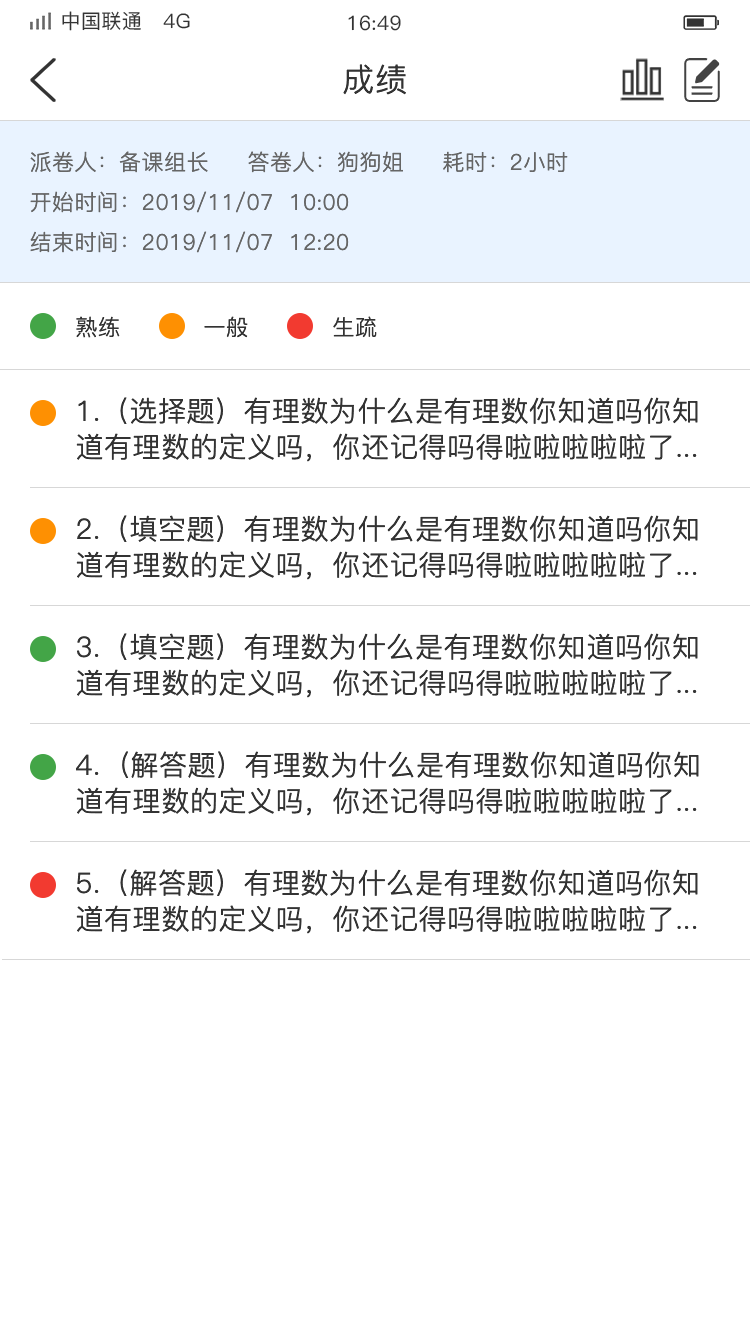
<style>
.page{position:relative;width:750px;height:1334px;background:#ffffff}
.page>*{position:absolute;margin:0}
.t1{font:20px "PingFang-SC-Medium";letter-spacing:0.02em;color:#333333}
.t2{font:32px "PingFang-SC-Regular";letter-spacing:0.02em;color:#333333}
.t3{font:22px "PingFang-SC-Regular";letter-spacing:0.02em;color:#666666}
.t4{font:22px "PingFang-SC-Regular";letter-spacing:0.02em;color:#333333}
.t5{font:28px/36px "PingFang-SC-Regular";letter-spacing:0.02em;color:#333333}
</style>
<div class="page">
<p class="t1" style="left:62px;top:11px;width:128px;height:20px">中国联通   4G</p>
<p class="t1" style="left:348px;top:15px;width:53px;height:16px">16:49</p>
<p class="t2" style="left:343px;top:64px;width:63px;height:31px">成绩</p>
<p class="t3" style="left:30px;top:151px;width:178px;height:22px">派卷人：备课组长</p>
<p class="t3" style="left:248px;top:151px;width:155px;height:22px">答卷人：狗狗姐</p>
<p class="t3" style="left:443px;top:151px;width:125px;height:22px">耗时：2小时</p>
<p class="t3" style="left:30px;top:191px;width:319px;height:22px">开始时间：2019/11/07  10:00</p>
<p class="t3" style="left:30px;top:231px;width:319px;height:22px">结束时间：2019/11/07  12:20</p>
<p class="t4" style="left:76px;top:316px;width:44px;height:22px">熟练</p>
<p class="t4" style="left:204px;top:316px;width:44px;height:22px">一般</p>
<p class="t4" style="left:333px;top:316px;width:44px;height:22px">生疏</p>
<p class="t5" style="left:76px;top:397px;width:622px;height:65px">1.（选择题）有理数为什么是有理数你知道吗你知道有理数的定义吗，你还记得吗得啦啦啦啦啦了...</p>
<p class="t5" style="left:76px;top:515px;width:622px;height:65px">2.（填空题）有理数为什么是有理数你知道吗你知道有理数的定义吗，你还记得吗得啦啦啦啦啦了...</p>
<p class="t5" style="left:76px;top:633px;width:622px;height:65px">3.（填空题）有理数为什么是有理数你知道吗你知道有理数的定义吗，你还记得吗得啦啦啦啦啦了...</p>
<p class="t5" style="left:76px;top:751px;width:623px;height:65px">4.  (解答题）有理数为什么是有理数你知道吗你知道有理数的定义吗，你还记得吗得啦啦啦啦啦了...</p>
<p class="t5" style="left:76px;top:869px;width:622px;height:65px">5.（解答题）有理数为什么是有理数你知道吗你知道有理数的定义吗，你还记得吗得啦啦啦啦啦了...</p>
</div>
